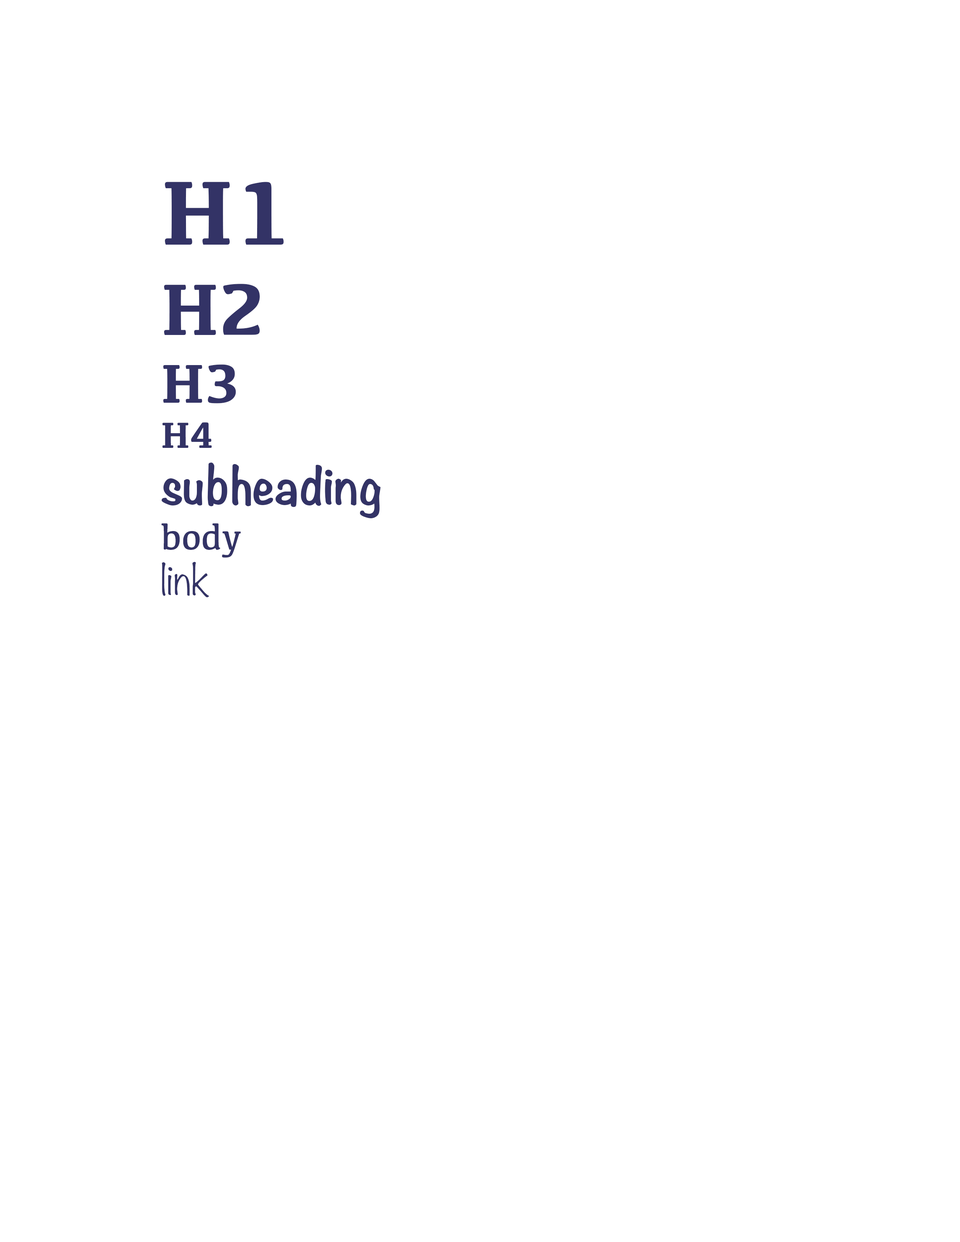
<style>
.page{position:relative;width:960px;height:1242px;background:#ffffff}
.page>*{position:absolute;margin:0}
.t1{font:47.1px "Noteworthy-Bold";color:#333366}
.t2{font:94.1px "Kefa-Bold";color:#333366}
.t3{font:75.3px "Kefa-Bold";color:#333366}
.t4{font:56.5px "Kefa-Bold";color:#333366}
.t5{font:37.6px "Kefa-Bold";color:#333366}
.t6{font:37.6px "Kefa-Regular";color:#333366}
.t7{font:37.6px "Noteworthy-Light";color:#333366}
</style>
<div class="page">
<p class="t1" style="left:161px;top:182px;width:220px;height:415px"><span class="t2">H1<br></span><span class="t3">H2<br></span><span class="t4">H3<br></span><span class="t5">H4<br></span>subheading<br><span class="t6">body<br></span><span class="t7">link</span></p>
</div>
